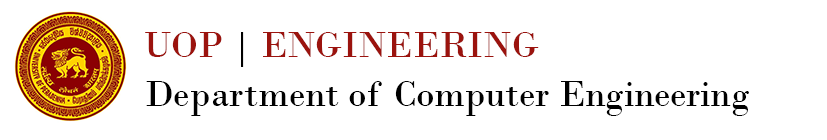
<style>
.page{position:relative;width:827px;height:140px;background:#ffffff}
.page>*{position:absolute;margin:0}
.t1{font:37.5px "BodoniMT";color:#9b130e}
.t2{font:37.5px "BodoniMT";color:#000000}
</style>
<div class="page">
<p class="t1" style="left:145px;top:32px;width:394px;height:35px">UOP <span class="t2">|</span> ENGINEERING</p>
<p class="t2" style="left:146px;top:81px;width:603px;height:35px">Department of Computer Engineering</p>
</div>
